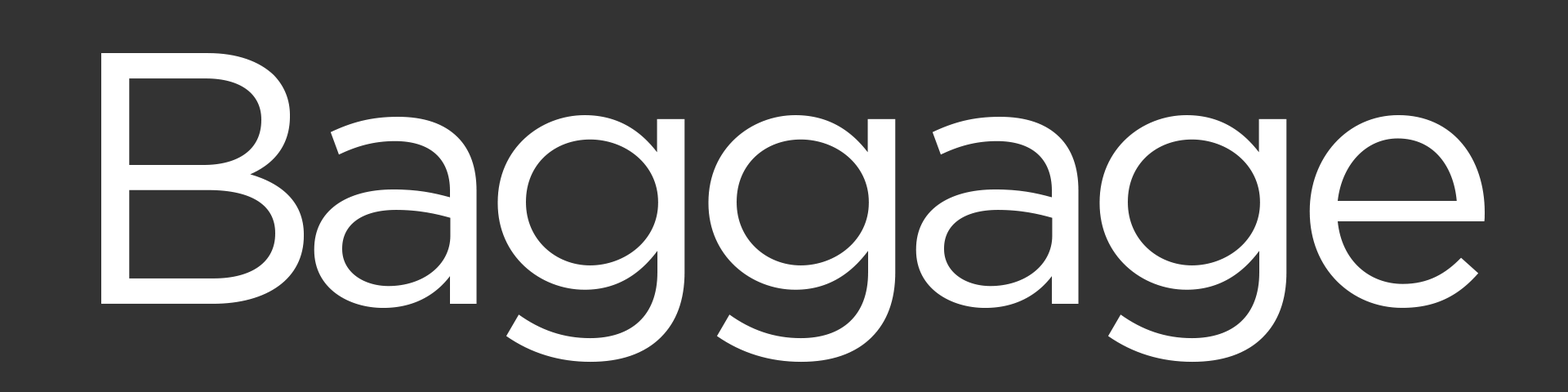
<style>
.page{position:relative;width:1568px;height:392px;background:#333333}
.page>*{position:absolute;margin:0}
.t1{font:357.7px "Gotham-Book";letter-spacing:-0.075em;color:#ffffff}
</style>
<div class="page">
<p class="t1" style="left:101px;top:53px;width:1384px;height:310px">Baggage</p>
</div>
